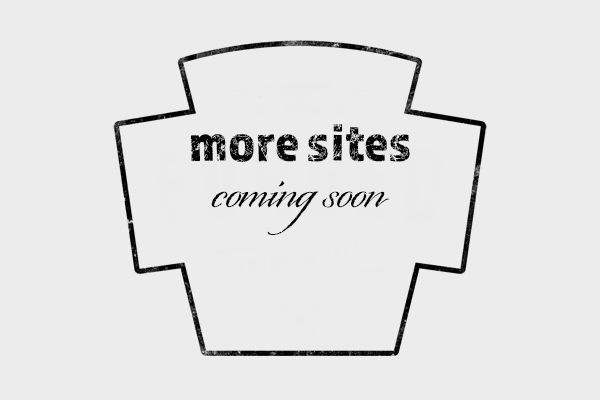
<style>
.page{position:relative;width:600px;height:400px;background:#ececec}
.page>*{position:absolute;margin:0}
.t1{font:56px "Almaq-Rough";color:#060606}
.t2{font:56px "Origins";color:#060606}
</style>
<div class="page">
<p class="t1" style="left:190px;top:124px;width:220px;height:39px">more sites</p>
<p class="t2" style="left:211px;top:180px;width:179px;height:55px">coming soon</p>
</div>
